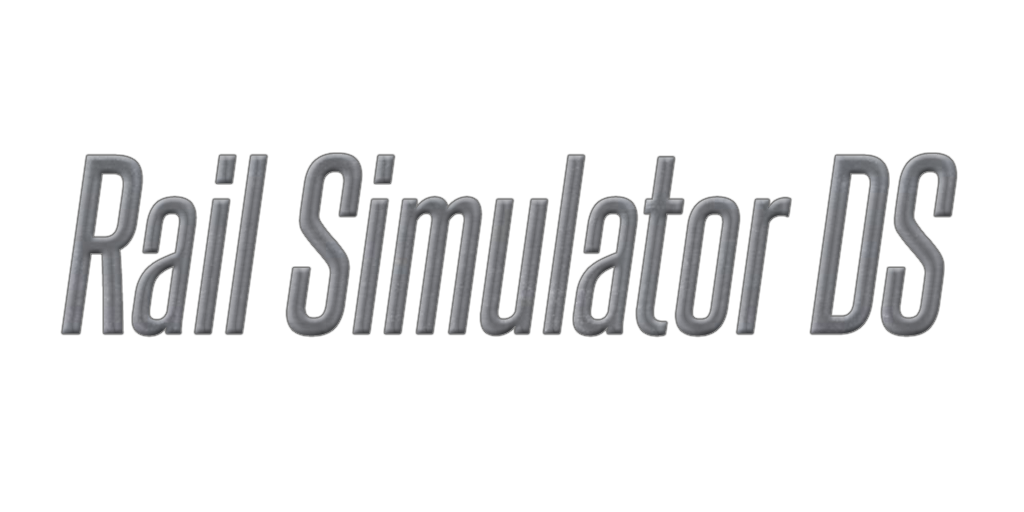
<style>
.page{position:relative;width:1024px;height:512px;background:#ffffff}
.page>*{position:absolute;margin:0}
.t1{font:215.2px "SteelfishRg-Italic"}
</style>
<div class="page">
<p class="t1" style="left:62px;top:154px;width:894px;height:182px">Rail Simulator DS</p>
</div>
